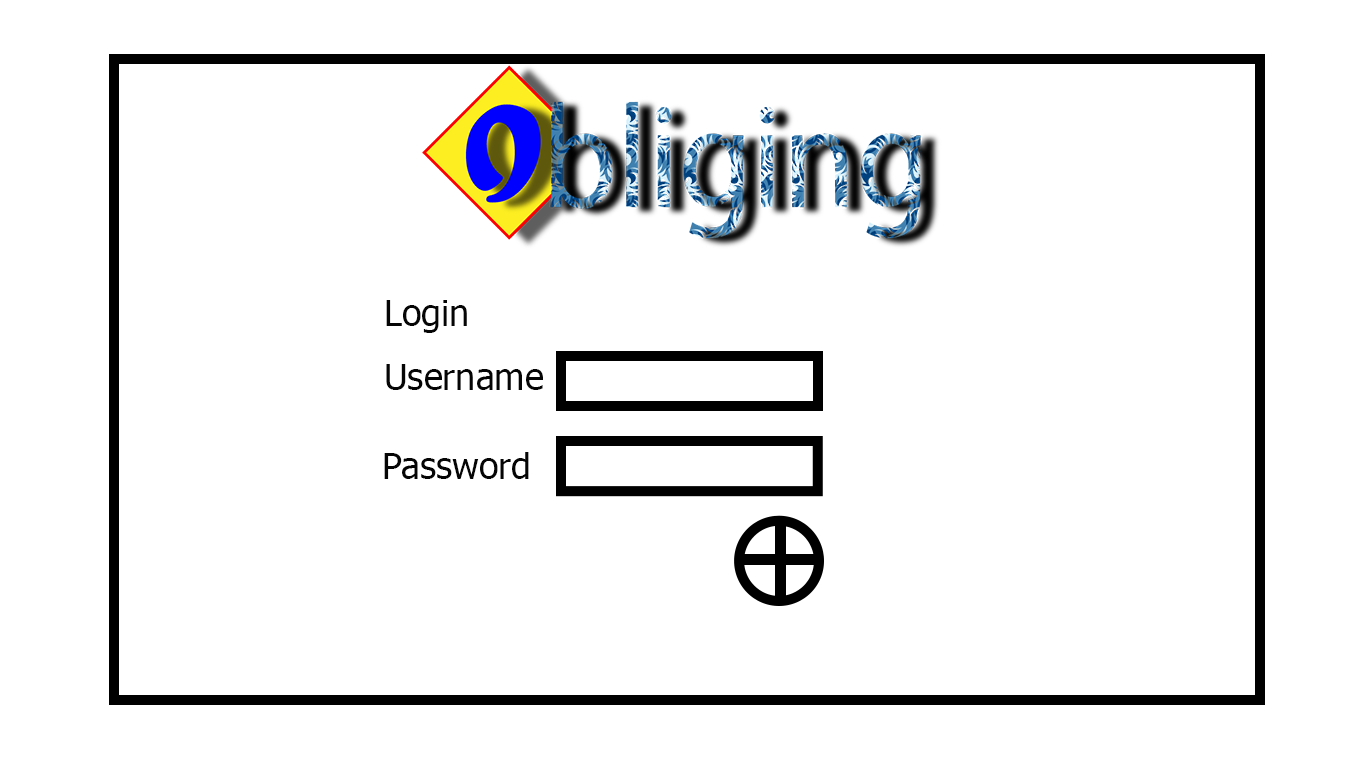
<style>
.page{position:relative;width:1366px;height:768px;background:#ffffff}
.page>*{position:absolute;margin:0}
.t1{font:36px "Tahoma";color:#050505}
</style>
<div class="page">
<p class="t1" style="left:386px;top:300px;width:81px;height:33px">Login</p>
<p class="t1" style="left:386px;top:364px;width:157px;height:26px">Username</p>
<p class="t1" style="left:384px;top:452px;width:145px;height:27px">Password</p>
</div>
